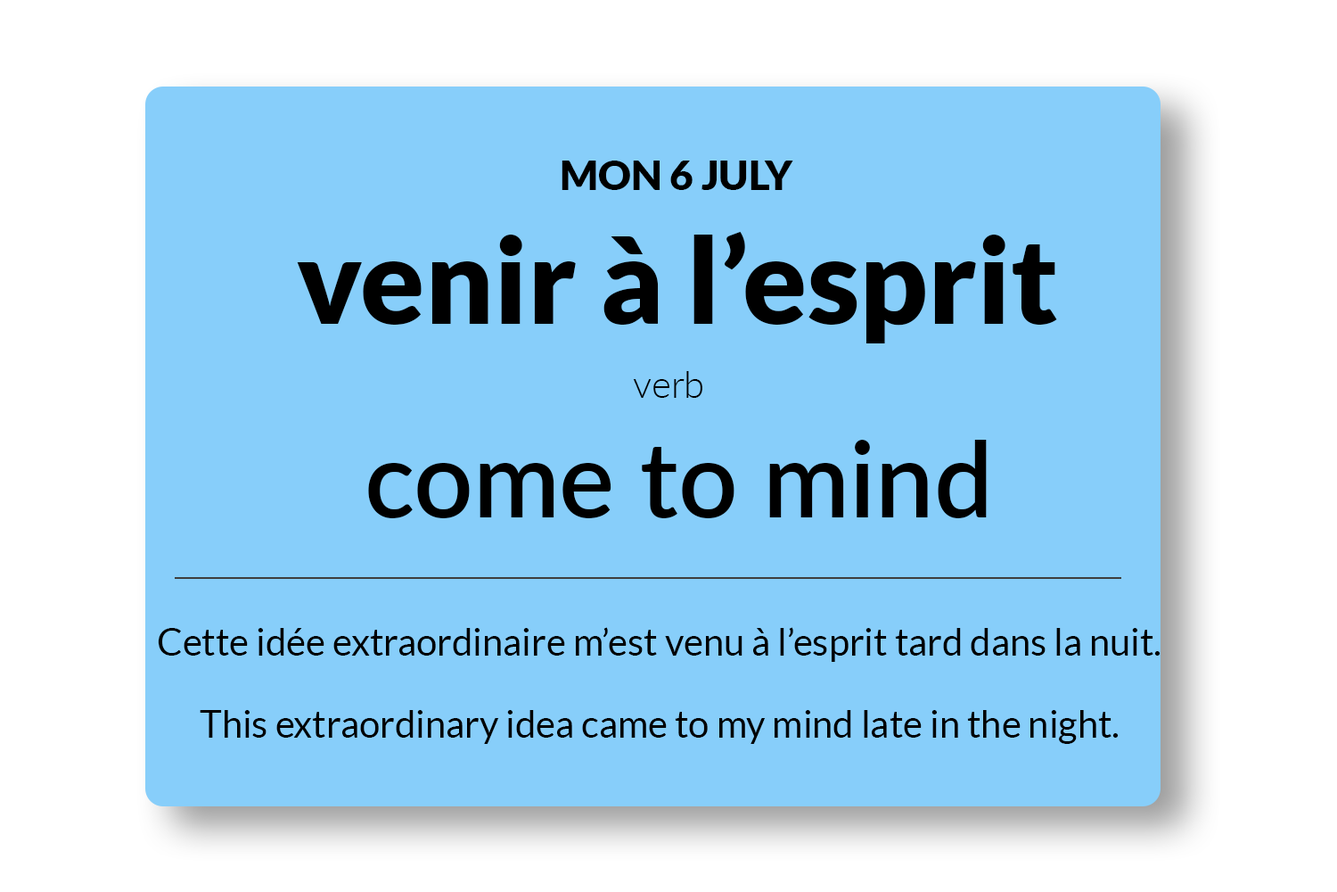
<style>
.page{position:relative;width:1337px;height:892px;background:#87cefa}
.page>*{position:absolute;margin:0}
.t1{font:40.9px "Lato-Black";color:#000000}
.t2{font:118.9px "Lato-Black";color:#000000}
.t3{font:37.2px "Lato-Light";color:#000000}
.t4{font:104px "Lato-Semibold";color:#000000}
.t5{font:37.2px "Lato-Regular";color:#000000}
</style>
<div class="page">
<p class="t1" style="left:562px;top:160px;width:232px;height:30px">MON 6 JULY</p>
<p class="t2" style="left:297px;top:231px;width:760px;height:112px">venir à l’esprit</p>
<p class="t3" style="left:633px;top:371px;width:70px;height:27px">verb</p>
<p class="t4" style="left:368px;top:440px;width:619px;height:78px">come to mind</p>
<p class="t5" style="left:158px;top:627px;width:1003px;height:35px">Cette idée extraordinaire m’est venu à l’esprit tard dans la nuit.</p>
<p class="t5" style="left:200px;top:710px;width:919px;height:34px">This extraordinary idea came to my mind late in the night.</p>
</div>
